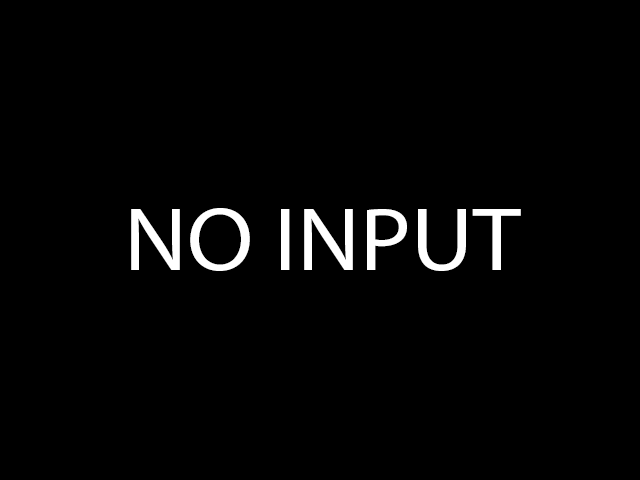
<style>
.page{position:relative;width:640px;height:480px;background:#000000}
.page>*{position:absolute;margin:0}
.t1{font:90px "MyriadPro-Regular";color:#ffffff;scale:1.07 1}
</style>
<div class="page">
<p class="t1" style="left:131px;top:208px;width:390px;height:63px">NO INPUT</p>
</div>
